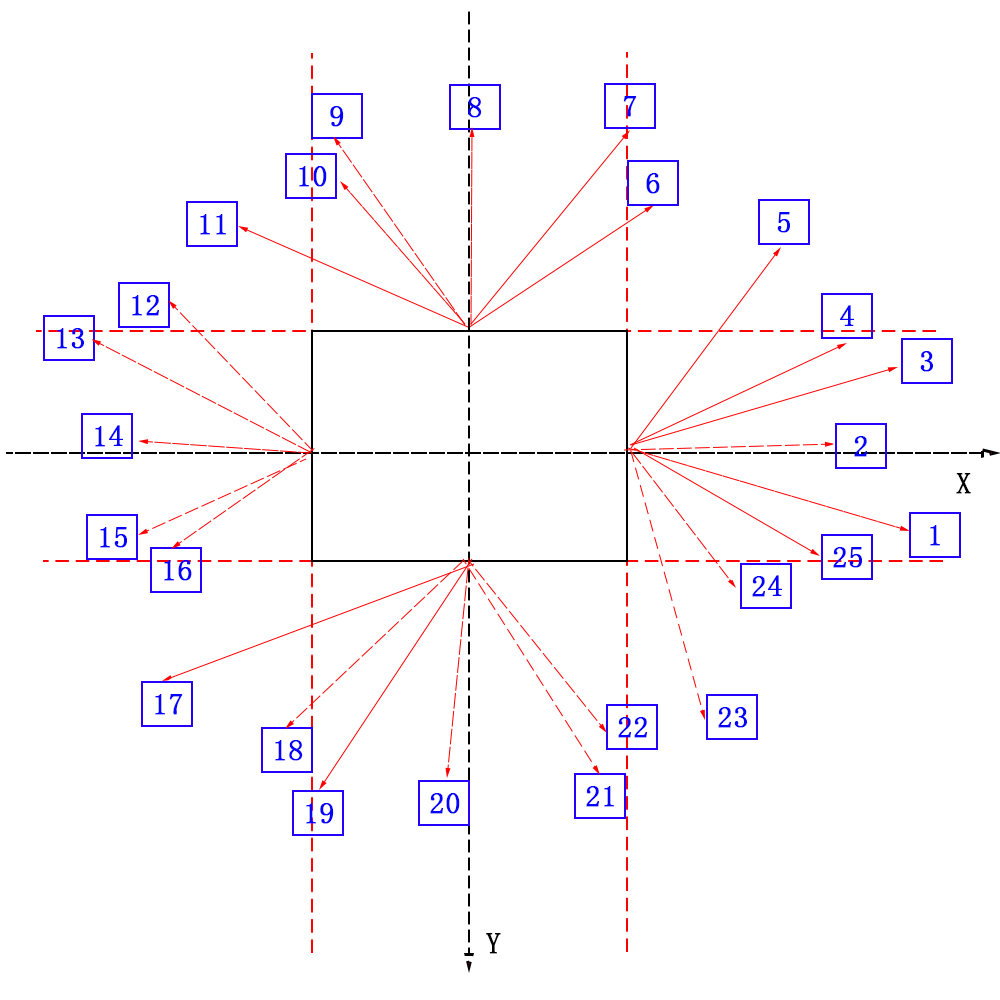
<style>
.page{position:relative;width:1000px;height:1000px;background:#ffffff}
.page>*{position:absolute;margin:0}
.t1{font:30px "YouYuan";color:#0600ff;font-weight:bold}
.t2{font:30px "YouYuan";color:#010000;font-weight:bold}
.t3{font:30px "YouYuan";color:#000000;font-weight:bold}
</style>
<div class="page">
<p class="t1" style="left:468px;top:97px;width:14px;height:21px">8</p>
<p class="t1" style="left:623px;top:96px;width:14px;height:21px">7</p>
<p class="t1" style="left:330px;top:106px;width:14px;height:21px">9</p>
<p class="t1" style="left:299px;top:166px;width:28px;height:21px">10</p>
<p class="t1" style="left:646px;top:173px;width:14px;height:21px">6</p>
<p class="t1" style="left:200px;top:214px;width:26px;height:21px">11</p>
<p class="t1" style="left:777px;top:212px;width:13px;height:21px">5</p>
<p class="t1" style="left:132px;top:295px;width:27px;height:21px">12</p>
<p class="t1" style="left:840px;top:305px;width:14px;height:21px">4</p>
<p class="t1" style="left:57px;top:328px;width:27px;height:21px">13</p>
<p class="t1" style="left:920px;top:351px;width:13px;height:21px">3</p>
<p class="t1" style="left:95px;top:425px;width:28px;height:22px">14</p>
<p class="t1" style="left:854px;top:436px;width:13px;height:21px">2</p>
<p class="t2" style="left:956px;top:473px;width:15px;height:21px">X</p>
<p class="t1" style="left:100px;top:527px;width:27px;height:21px">15</p>
<p class="t1" style="left:930px;top:525px;width:10px;height:21px">1</p>
<p class="t1" style="left:833px;top:547px;width:29px;height:21px">25</p>
<p class="t1" style="left:164px;top:560px;width:28px;height:21px">16</p>
<p class="t1" style="left:752px;top:575px;width:30px;height:22px">24</p>
<p class="t1" style="left:155px;top:694px;width:28px;height:21px">17</p>
<p class="t1" style="left:718px;top:707px;width:29px;height:21px">23</p>
<p class="t1" style="left:618px;top:717px;width:29px;height:21px">22</p>
<p class="t1" style="left:275px;top:740px;width:28px;height:21px">18</p>
<p class="t1" style="left:430px;top:793px;width:30px;height:21px">20</p>
<p class="t1" style="left:586px;top:786px;width:28px;height:21px">21</p>
<p class="t1" style="left:306px;top:803px;width:28px;height:21px">19</p>
<p class="t3" style="left:486px;top:933px;width:15px;height:21px">Y</p>
</div>
